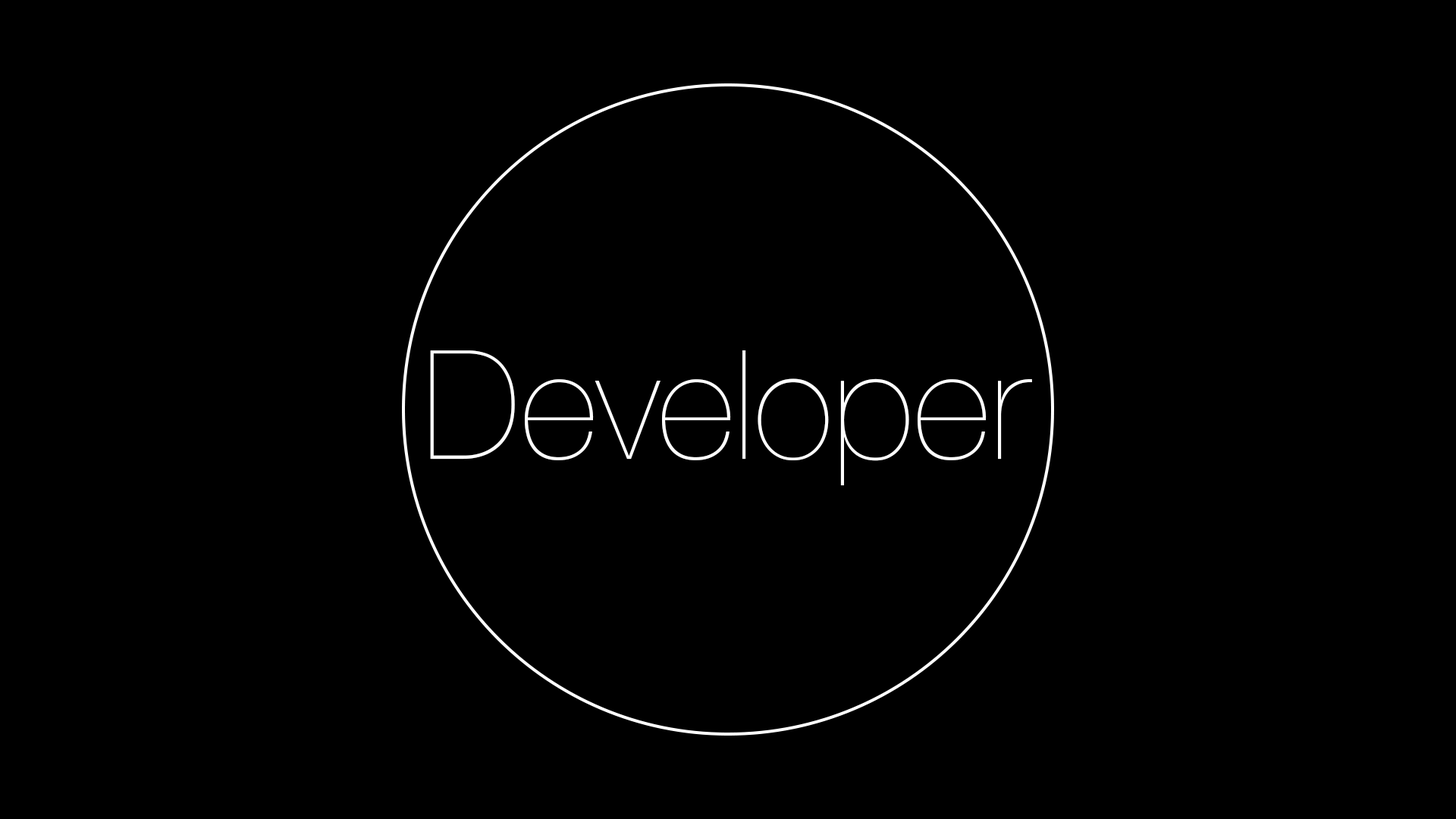
<style>
.page{position:relative;width:1456px;height:819px;background:#000000}
.page>*{position:absolute;margin:0}
.t1{font:151.7px "HelveticaNeue-UltraLight";color:#ffffff}
</style>
<div class="page">
<p class="t1" style="left:430px;top:350px;width:602px;height:135px">Developer</p>
</div>
